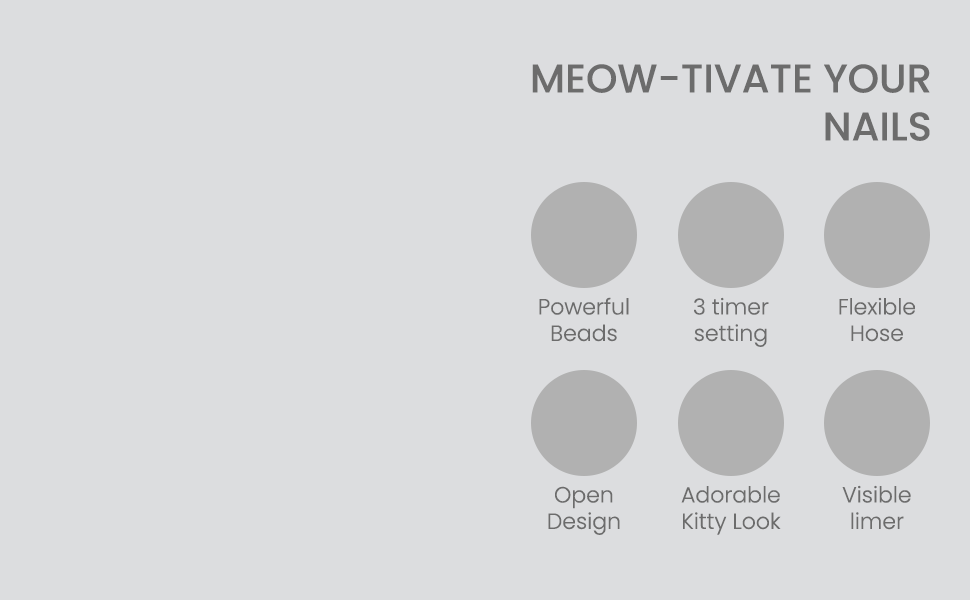
<style>
.page{position:relative;width:970px;height:600px;background:#dcdddf}
.page>*{position:absolute;margin:0}
.t1{font:40px "Poppins-Medium";color:#6c6c6c;text-transform:uppercase}
.t2{font:22px "Poppins-Light";color:#6c6c6c}
</style>
<div class="page">
<p class="t1" style="left:532px;top:64px;width:398px;height:77px;text-align:right">Meow-tivate Your<br>Nails</p>
<p class="t2" style="left:539px;top:297px;width:90px;height:45px;text-align:center">Powerful<br>Beads</p>
<p class="t2" style="left:694px;top:297px;width:75px;height:50px;text-align:center">3 timer<br>setting</p>
<p class="t2" style="left:839px;top:297px;width:76px;height:45px;text-align:center">Flexible<br>Hose</p>
<p class="t2" style="left:548px;top:486px;width:72px;height:49px;text-align:center">Open<br>Design</p>
<p class="t2" style="left:681px;top:486px;width:100px;height:49px;text-align:center">Adorable<br>Kitty Look</p>
<p class="t2" style="left:842px;top:485px;width:69px;height:45px;text-align:center">Visible<br>limer</p>
</div>
